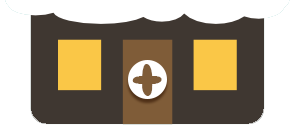
<style>
.page{position:relative;width:300px;height:125px;background:#3f3731}
.page>*{position:absolute;margin:0}
.t1{font:88.2px "Armonioso";color:#7f5c38;scale:0.84 1}
</style>
<div class="page">
<p class="t1" style="left:132px;top:64px;width:30px;height:32px">+</p>
</div>
